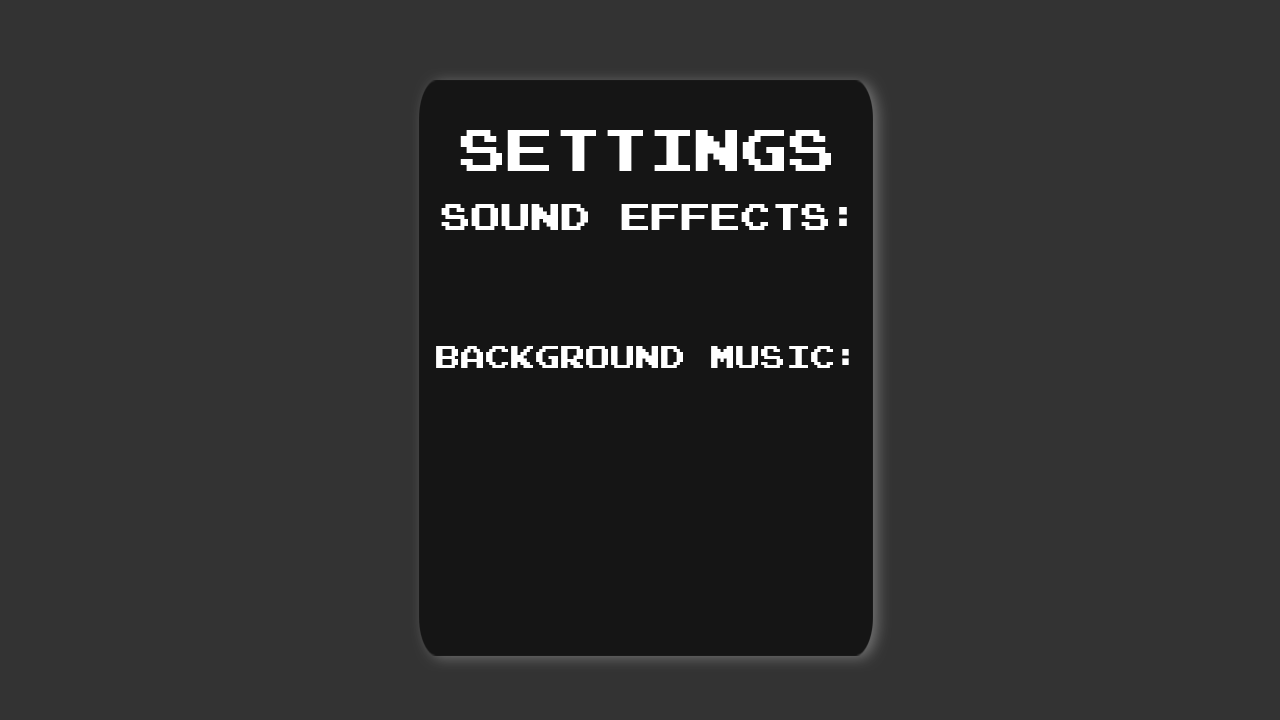
<style>
.page{position:relative;width:1280px;height:720px;background:#333333}
.page>*{position:absolute;margin:0}
.t1{font:47px "Emulogic";color:#ffffff}
.t2{font:30px "Emulogic";color:#ffffff}
.t3{font:25px "Emulogic";color:#ffffff}
</style>
<div class="page">
<p class="t1" style="left:460px;top:130px;width:371px;height:41px">settings</p>
<p class="t2" style="left:441px;top:204px;width:406px;height:26px">Sound effects:</p>
<p class="t3" style="left:436px;top:346px;width:413px;height:22px">Background music:</p>
</div>
